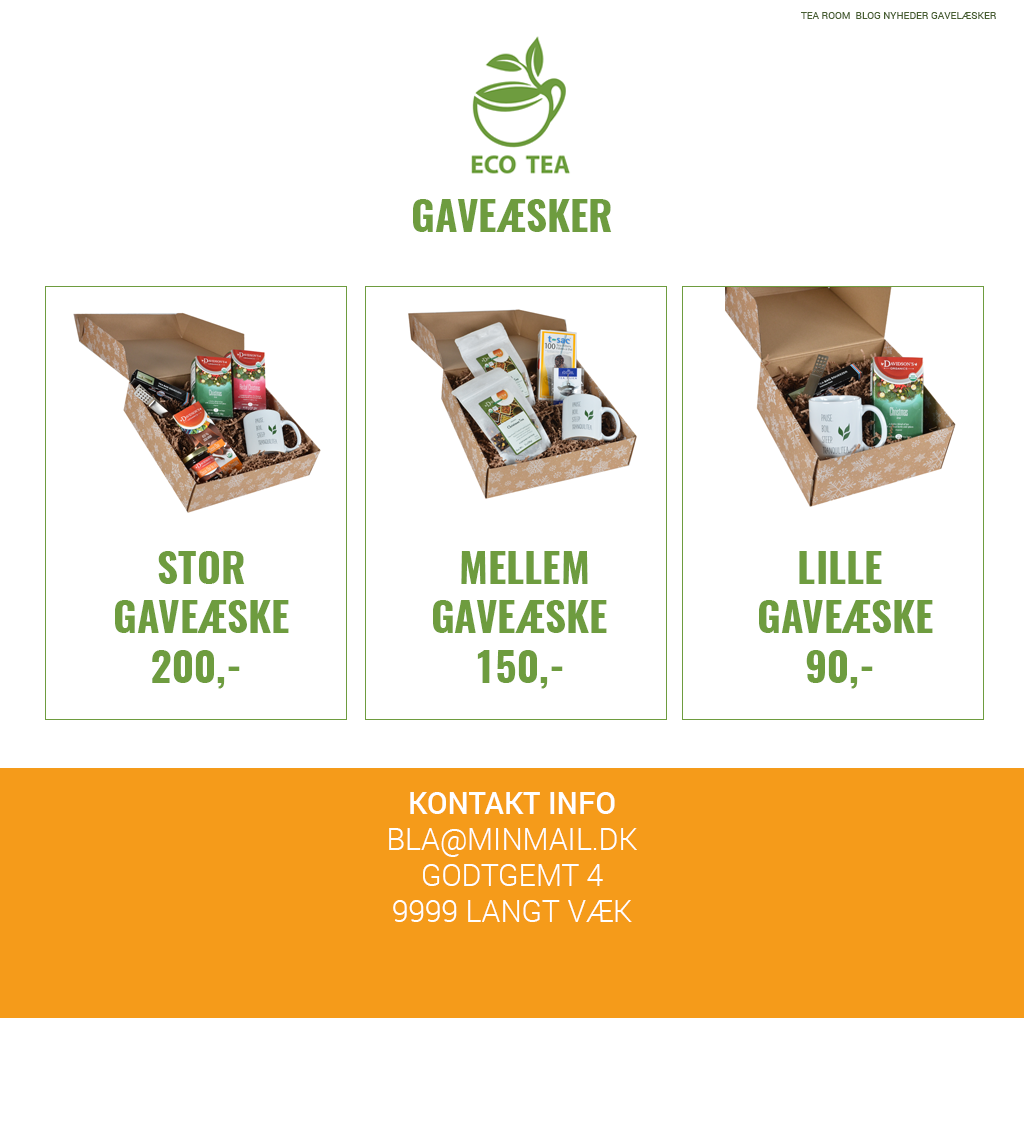
<style>
.page{position:relative;width:1024px;height:1124px;background:#ffffff}
.page>*{position:absolute;margin:0}
.t1{font:10px "Roboto-Regular";color:#475e30}
.t2{font:41px "Oswald-Bold";color:#6e9c3f}
.t3{font:30px "Roboto-Light";color:#ffffff}
.t4{font:30px "Roboto-Medium";color:#ffffff}
</style>
<div class="page">
<p class="t1" style="left:801px;top:12px;width:195px;height:7px">TEA ROOM  BLOG NYHEDER GAVELÆSKER</p>
<p class="t2" style="left:413px;top:199px;width:199px;height:33px">GAVEÆSKER</p>
<p class="t2" style="left:115px;top:551px;width:174px;height:138px;text-align:center">STOR<br> GAVEÆSKE<br>200,-</p>
<p class="t2" style="left:433px;top:551px;width:174px;height:138px;text-align:center">MELLEM GAVEÆSKE<br>150,-</p>
<p class="t2" style="left:759px;top:551px;width:174px;height:138px;text-align:center">LILLE<br> GAVEÆSKE<br>90,-</p>
<p class="t3" style="left:389px;top:792px;width:248px;height:130px;text-align:center"><span class="t4">KONTAKT INFO<br></span>BLA@MINMAIL.DK<br>GODTGEMT 4<br>9999 LANGT VÆK</p>
</div>
